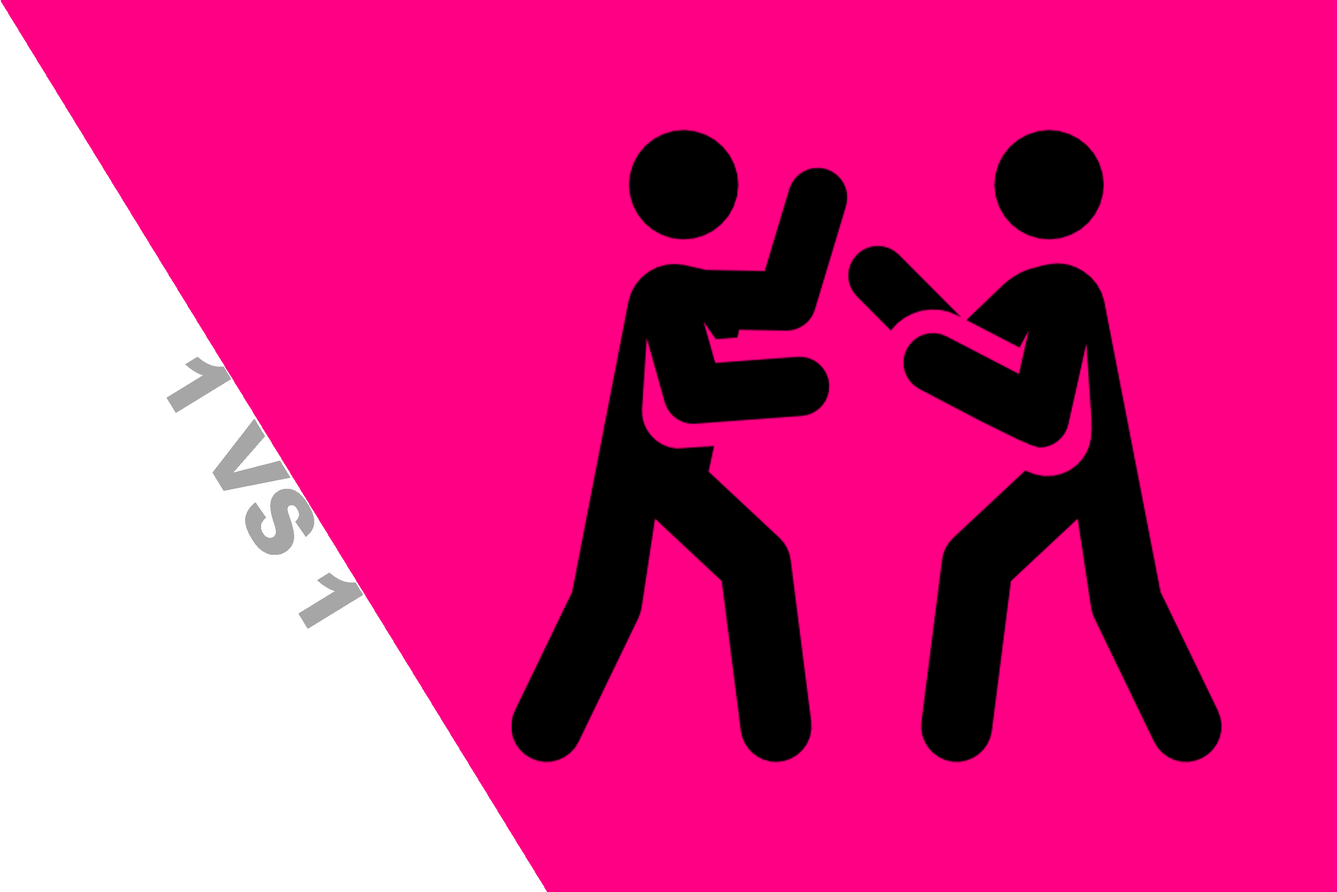
<style>
.page{position:relative;width:1337px;height:892px;background:#ff0084}
.page>*{position:absolute;margin:0}
.t1{font:89.2px "Arial-Black";color:#a6a6a6}
</style>
<div class="page">
<p class="t1" style="left:167px;top:357px;width:196px;height:272px;rotate:59deg">1 VS 1</p>
</div>
